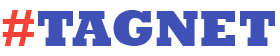
<style>
.page{position:relative;width:280px;height:56px;background:#ffffff}
.page>*{position:absolute;margin:0}
.t1{font:52.1px "Rockwell-ExtraBold";color:#3f51b5}
.t2{font:52.1px "Rockwell-ExtraBold";color:#f44336}
</style>
<div class="page">
<p class="t1" style="left:2px;top:10px;width:273px;height:36px">TAGNET<span class="t2">#</span></p>
</div>
